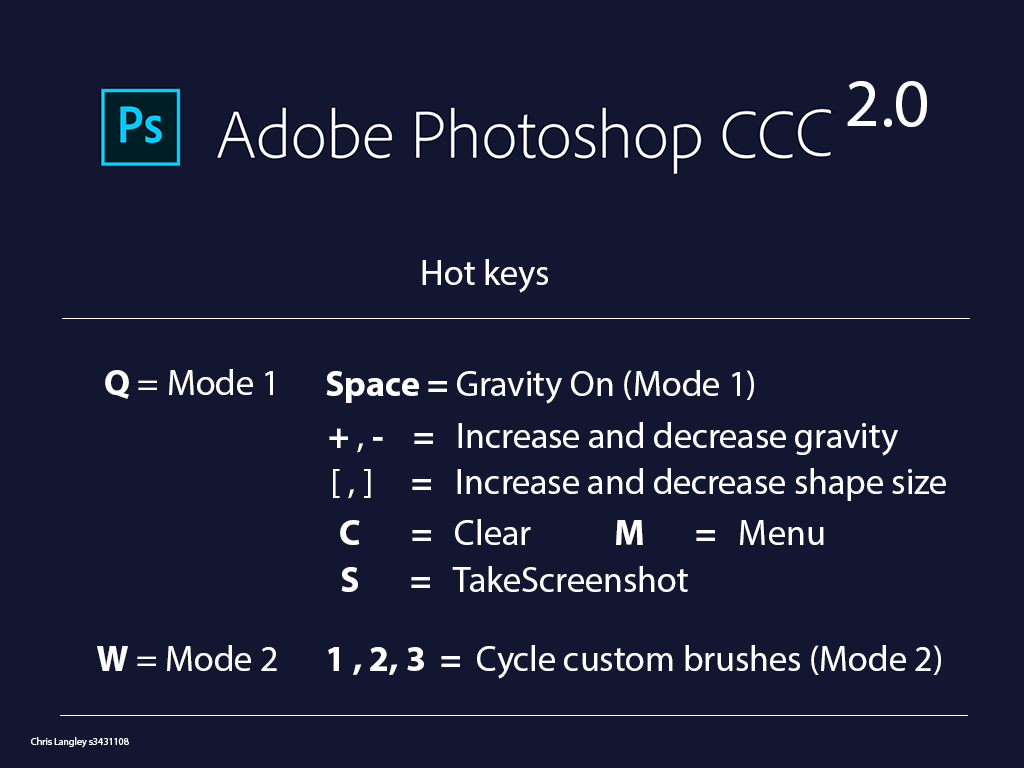
<style>
.page{position:relative;width:1024px;height:768px;background:#121631}
.page>*{position:absolute;margin:0}
.t1{font:68.1px "MyriadPro-Regular";color:#ffffff}
.t2{font:36px "MyriadPro-Regular";color:#ffffff}
.t3{font:36px "MyriadPro-Bold";color:#ffffff}
.t4{font:10px "MyriadPro-Regular";color:#ffffff}
</style>
<div class="page">
<p class="t1" style="left:847px;top:81px;width:80px;height:46px">2.0</p>
<p class="t2" style="left:422px;top:259px;width:126px;height:34px">Hot keys</p>
<p class="t2" style="left:105px;top:369px;width:168px;height:30px"><span class="t3">Q </span>= Mode 1</p>
<p class="t2" style="left:326px;top:370px;width:428px;height:34px"><span class="t3">Space = </span>Gravity On (Mode 1)</p>
<p class="t2" style="left:329px;top:422px;width:569px;height:34px"><span class="t3">+ </span>,<span class="t3"> -    =  </span> Increase and decrease gravity</p>
<p class="t2" style="left:333px;top:468px;width:613px;height:33px">[ , ]     <span class="t3">=</span>   Increase and decrease shape size</p>
<p class="t3" style="left:340px;top:519px;width:191px;height:26px">C       =   <span class="t2">Clear</span></p>
<p class="t3" style="left:616px;top:520px;width:208px;height:25px">M       =   <span class="t2">Menu</span></p>
<p class="t2" style="left:341px;top:566px;width:347px;height:26px"><span class="t3">S       =   </span>TakeScreenshot</p>
<p class="t2" style="left:97px;top:645px;width:180px;height:26px"><span class="t3">W </span>= Mode 2</p>
<p class="t2" style="left:328px;top:645px;width:613px;height:34px"><span class="t3">1 , 2, 3  =  </span>Cycle custom brushes (Mode 2)</p>
<p class="t4" style="left:31px;top:737px;width:98px;height:11px">Chris Langley s3431108</p>
</div>
